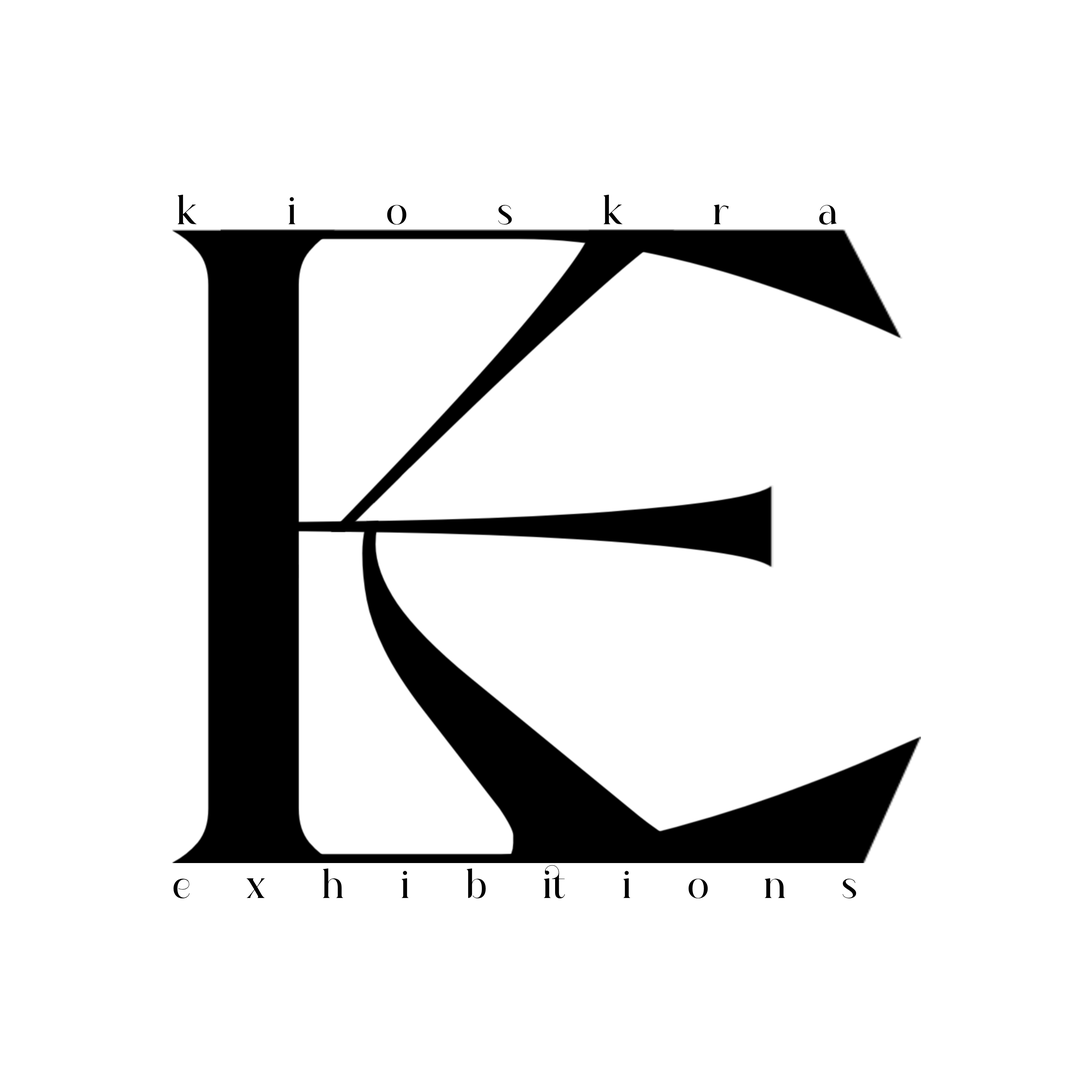
<style>
.page{position:relative;width:1092px;height:1092px;background:#ffffff}
.page>*{position:absolute;margin:0}
.t1{font:41.1px "stangith";letter-spacing:2.192em;color:#000000}
.t2{font:41.1px "stangith";letter-spacing:1.365em;color:#000000}
</style>
<div class="page">
<p class="t1" style="left:177px;top:194px;width:660px;height:31px">kioskra</p>
<p class="t2" style="left:173px;top:865px;width:683px;height:33px">exhibitions</p>
</div>
